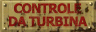
<style>
.page{position:relative;width:96px;height:32px}
.page>*{position:absolute;margin:0}
.t1{font:13px/13px "Tahoma-Bold";letter-spacing:-0.04em;color:#8d1810;text-transform:uppercase}
</style>
<div class="page">
<p class="t1" style="left:9px;top:3px;width:79px;height:24px;text-align:center">controle<br>da turbina</p>
</div>
